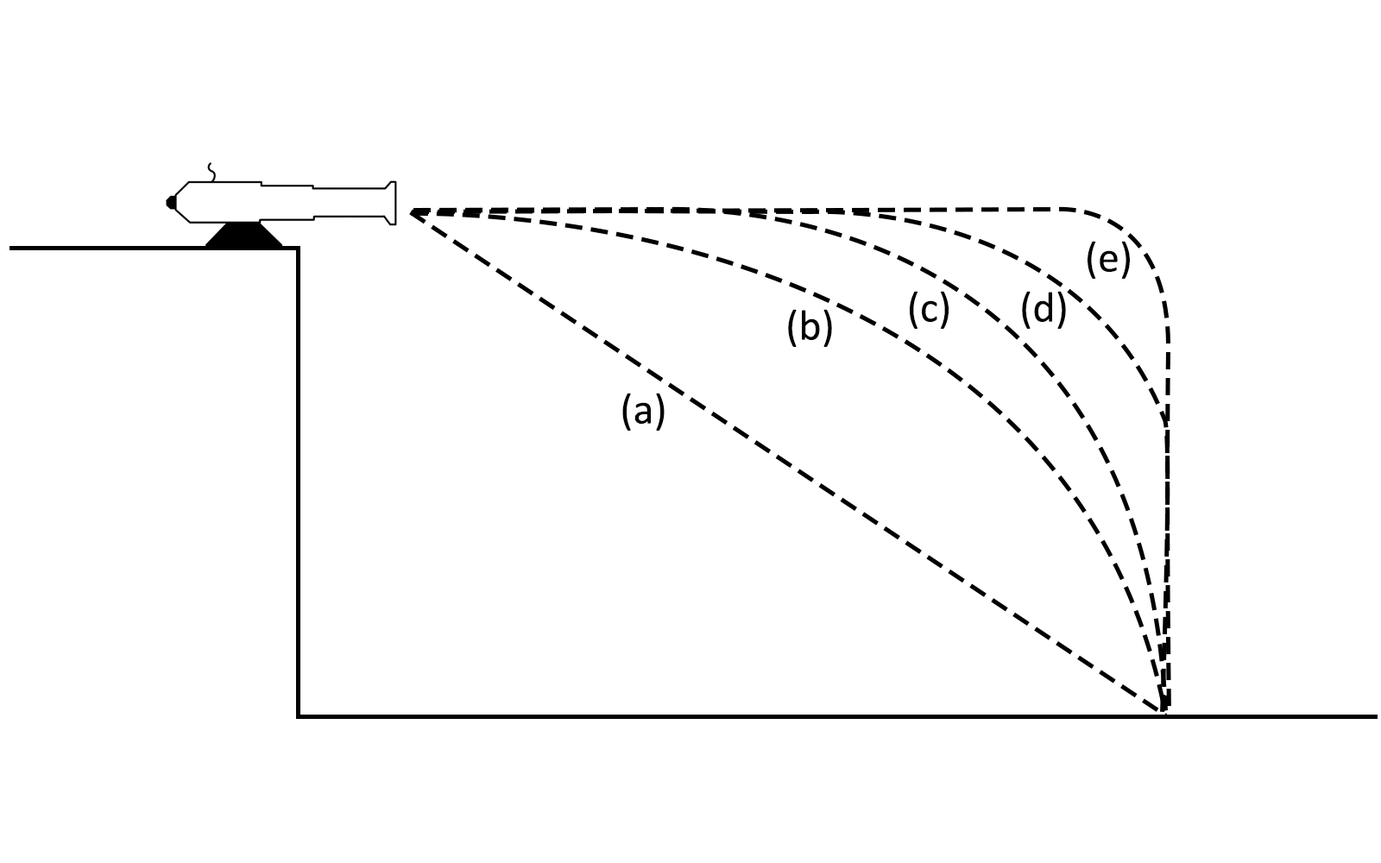
<style>
.page{position:relative;width:1381px;height:863px;background:#ffffff}
.page>*{position:absolute;margin:0}
.t1{font:43.2px "Calibri";color:#000000}
</style>
<div class="page">
<p class="t1" style="left:1088px;top:241px;width:42px;height:38px">(e)</p>
<p class="t1" style="left:910px;top:291px;width:39px;height:38px">(c)</p>
<p class="t1" style="left:1022px;top:291px;width:44px;height:38px">(d)</p>
<p class="t1" style="left:788px;top:309px;width:44px;height:38px">(b)</p>
<p class="t1" style="left:622px;top:393px;width:43px;height:38px">(a)</p>
</div>
